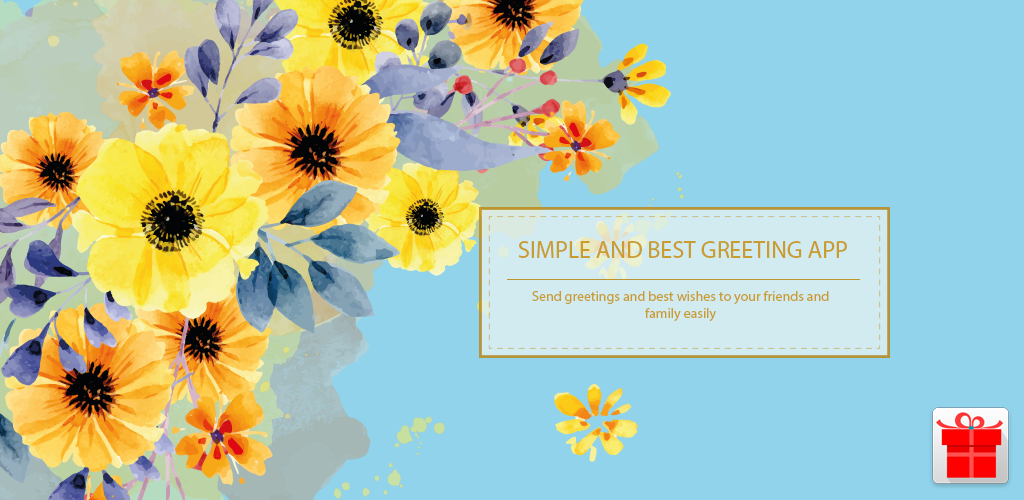
<style>
.page{position:relative;width:1024px;height:500px;background:#90d3eb}
.page>*{position:absolute;margin:0}
.t1{font:24px "MyriadPro-Regular";color:#c99c2d;text-transform:uppercase}
.t2{font:14px "MyriadPro-Regular";color:#c99c2d}
</style>
<div class="page">
<p class="t1" style="left:518px;top:241px;width:329px;height:17px">Simple and best Greeting App</p>
<p class="t2" style="left:532px;top:291px;width:297px;height:31px;text-align:center">Send greetings and best wishes to your friends and <br>family easily</p>
</div>
